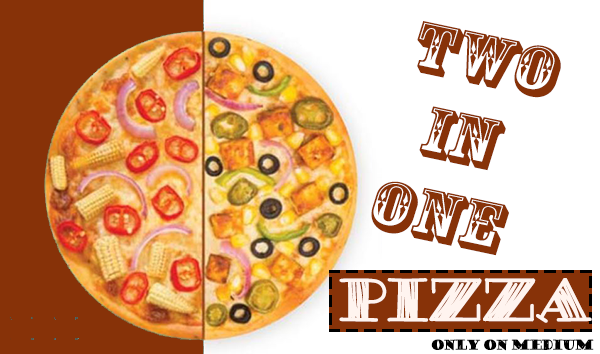
<style>
.page{position:relative;width:600px;height:354px;background:#ffffff}
.page>*{position:absolute;margin:0}
.t1{font:68.2px "RosewoodStd-Regular";color:#873208;scale:1.19 1}
.t2{font:60px "DEGAWSDemo";color:#fff4ef}
.t3{font:14px "DEGAWSDemo";color:#000000}
</style>
<div class="page">
<p class="t1" style="left:371px;top:21px;width:190px;height:235px;text-align:center;rotate:12deg">TWO<br>IN<br>ONE</p>
<p class="t2" style="left:339px;top:278px;width:253px;height:45px">PIZZA</p>
<p class="t3" style="left:431px;top:339px;width:163px;height:12px">ONLY ON MEDIUM</p>
</div>
